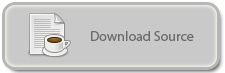
<style>
.page{position:relative;width:225px;height:73px;background:#c9c9c9}
.page>*{position:absolute;margin:0}
.t1{font:14px "MyriadPro-Regular";color:#6a6a6a}
</style>
<div class="page">
<p class="t1" style="left:91px;top:31px;width:103px;height:10px">Download Source</p>
</div>
